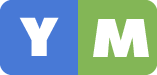
<style>
.page{position:relative;width:157px;height:75px;background:#4879d6}
.page>*{position:absolute;margin:0}
.t1{font:54.5px "FuturaFuturisXC";color:#ffffff}
</style>
<div class="page">
<p class="t1" style="left:19px;top:17px;width:40px;height:39px">Y</p>
<p class="t1" style="left:93px;top:19px;width:56px;height:38px">M</p>
</div>
